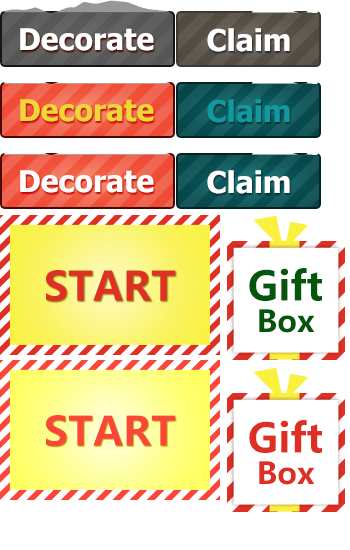
<style>
.page{position:relative;width:350px;height:550px;background:#ffffff}
.page>*{position:absolute;margin:0}
.t1{font:30px "Tahoma-Bold";color:#ffffff}
.t2{font:30px "Tahoma-Bold";color:#f0d735}
.t3{font:30px "Tahoma-Bold";color:#10999f}
.t4{font:40px/31.4px "MicrosoftYaHei-Bold";color:#05560d}
.t5{font:30px/31.4px "MicrosoftYaHei-Bold";color:#05560d}
.t6{font:40px/31.4px "MicrosoftYaHei-Bold";color:#dd3025}
.t7{font:30px/31.4px "MicrosoftYaHei-Bold";color:#dd3025}
</style>
<div class="page">
<p class="t1" style="left:20px;top:28px;width:134px;height:23px">Decorate</p>
<p class="t1" style="left:207px;top:28px;width:83px;height:24px">Claim</p>
<p class="t2" style="left:20px;top:99px;width:134px;height:23px">Decorate</p>
<p class="t3" style="left:207px;top:99px;width:83px;height:24px">Claim</p>
<p class="t1" style="left:20px;top:170px;width:134px;height:23px">Decorate</p>
<p class="t1" style="left:207px;top:170px;width:83px;height:24px">Claim</p>
<p class="t4" style="left:249px;top:268px;width:73px;height:65px">Gift<br><span class="t5"> Box</span></p>
<p class="t6" style="left:249px;top:420px;width:73px;height:65px">Gift<br><span class="t7"> Box</span></p>
</div>
